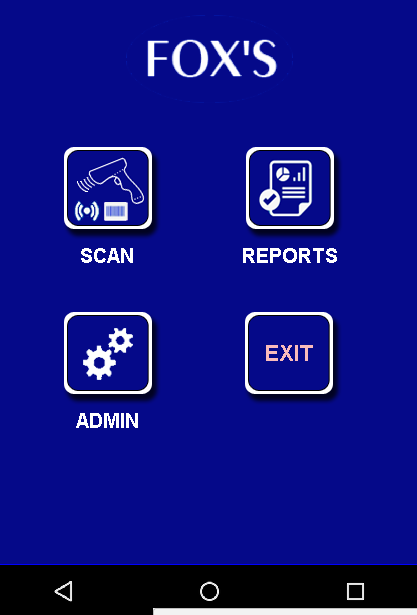
<style>
.page{position:relative;width:417px;height:615px;background:#050989}
.page>*{position:absolute;margin:0}
.t1{font:20px "Arial-BoldMT";color:#ffffff}
.t2{font:22px "Arial-BoldMT";color:#f9bbbb}
</style>
<div class="page">
<p class="t1" style="left:81px;top:248px;width:52px;height:15px">SCAN</p>
<p class="t1" style="left:243px;top:248px;width:94px;height:15px">REPORTS</p>
<p class="t2" style="left:266px;top:345px;width:47px;height:16px">EXIT</p>
<p class="t1" style="left:76px;top:413px;width:62px;height:15px">ADMIN</p>
</div>
